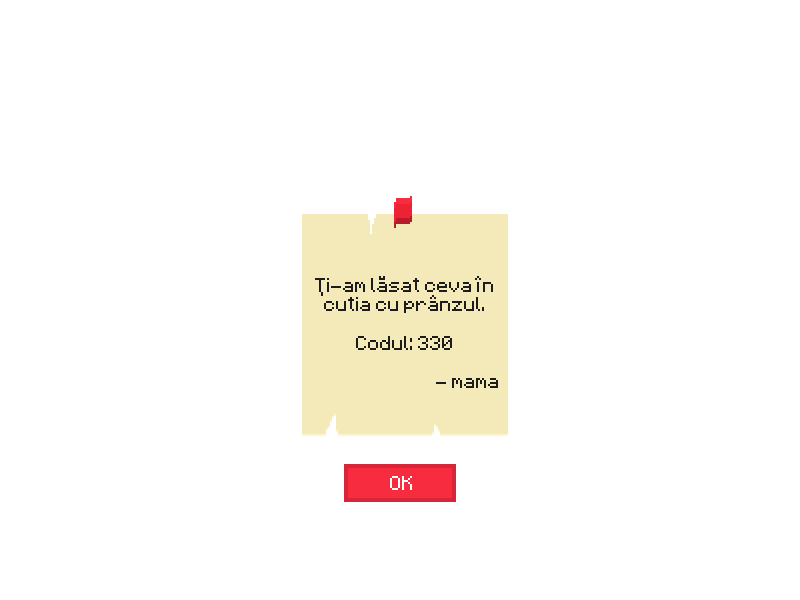
<style>
.page{position:relative;width:800px;height:600px;background:#ffffff}
.page>*{position:absolute;margin:0}
.t1{font:16px "Minecraftia-Regular";color:#1c1c1c}
</style>
<div class="page">
<p class="t1" style="left:315px;top:276px;width:183px;height:112px;text-align:center">Ți-am lăsat ceva în cutia cu prânzul.<br><br>Codul: 330<br><br>- mama</p>
</div>
